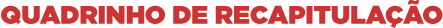
<style>
.page{position:relative;width:443px;height:28px;background:#ffffff}
.page>*{position:absolute;margin:0}
.t1{font:25.5px "Gotham-Ultra";color:#cc3333;text-transform:uppercase}
</style>
<div class="page">
<p class="t1" style="left:1px;top:0px;width:442px;height:28px">quadrinho de recapitulação</p>
</div>
